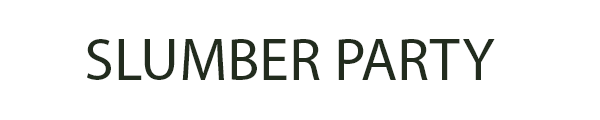
<style>
.page{position:relative;width:600px;height:120px;background:#ffffff}
.page>*{position:absolute;margin:0}
.t1{font:60px "MyriadPro-Regular";color:#212b1d}
</style>
<div class="page">
<p class="t1" style="left:87px;top:39px;width:408px;height:41px">SLUMBER PARTY</p>
</div>
